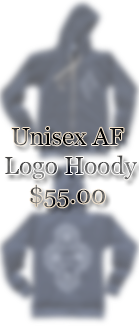
<style>
.page{position:relative;width:139px;height:327px;background:#ffffff}
.page>*{position:absolute;margin:0}
.t1{font:24.4px "Vani"}
</style>
<div class="page">
<p class="t1" style="left:5px;top:127px;width:132px;height:81px;text-align:center">Unisex AF<br> Logo Hoody<br>$55.00</p>
</div>
